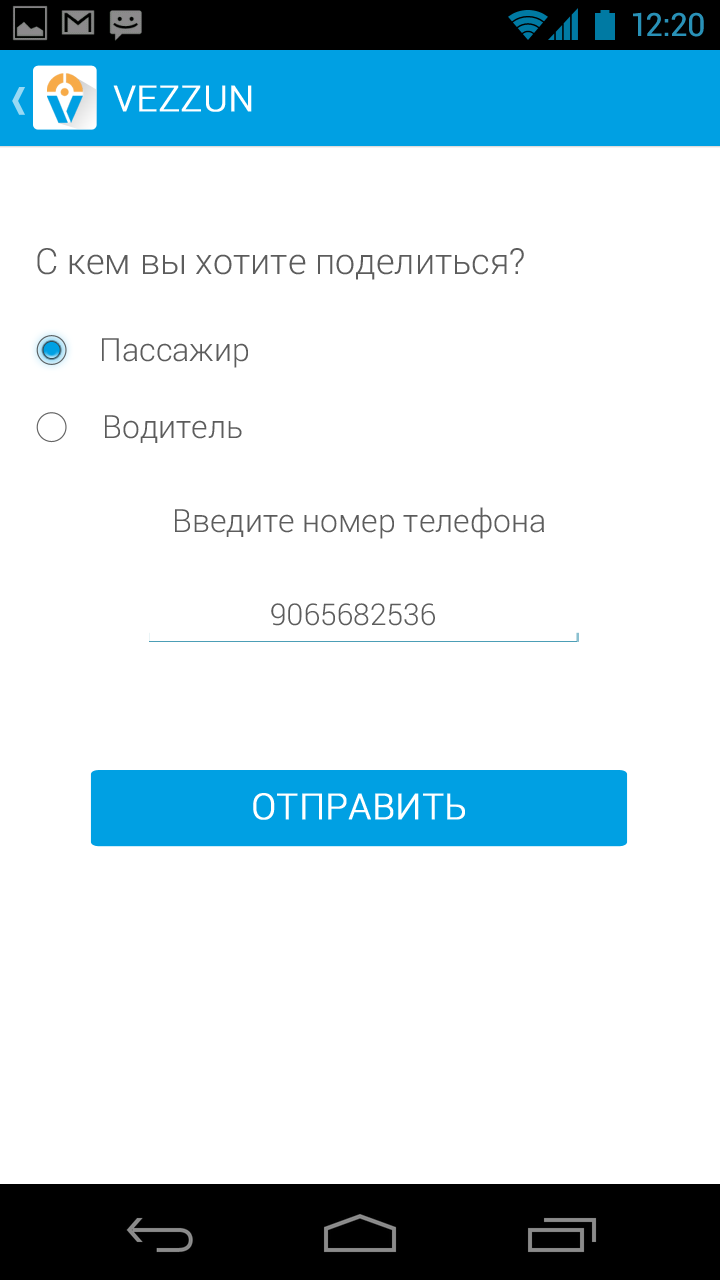
<style>
.page{position:relative;width:720px;height:1280px;background:#ffffff}
.page>*{position:absolute;margin:0}
.t1{font:32px "Roboto-Regular";color:#2991b7}
.t2{font:36px "Roboto-Light";color:#ffffff;text-transform:uppercase;font-weight:bold}
.t3{font:36px "Roboto-Light";color:#5c5c5c}
.t4{font:32px "Roboto-Light";color:#5c5c5c}
.t5{font:30px "Roboto-Light";color:#5c5c5c}
.t6{font:36px "Roboto-Light";color:#ffffff;font-weight:bold}
</style>
<div class="page">
<p class="t1" style="left:633px;top:12px;width:71px;height:25px">12:20</p>
<p class="t2" style="left:113px;top:85px;width:139px;height:27px">Vezzun</p>
<p class="t3" style="left:37px;top:248px;width:487px;height:32px">С кем вы хотите поделиться?</p>
<p class="t4" style="left:102px;top:338px;width:146px;height:30px">Пассажир</p>
<p class="t4" style="left:105px;top:415px;width:137px;height:28px">Водитель</p>
<p class="t4" style="left:175px;top:507px;width:369px;height:32px">Введите номер телефона</p>
<p class="t5" style="left:271px;top:603px;width:164px;height:23px">9065682536</p>
<p class="t6" style="left:253px;top:793px;width:212px;height:27px">ОТПРАВИТЬ</p>
</div>
